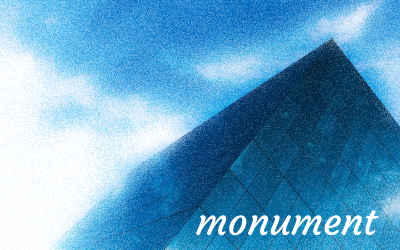
<style>
.page{position:relative;width:400px;height:250px}
.page>*{position:absolute;margin:0}
.t1{font:39px "Courgette-Regular";color:#ffffff}
</style>
<div class="page">
<p class="t1" style="left:196px;top:210px;width:183px;height:26px">monument</p>
</div>
